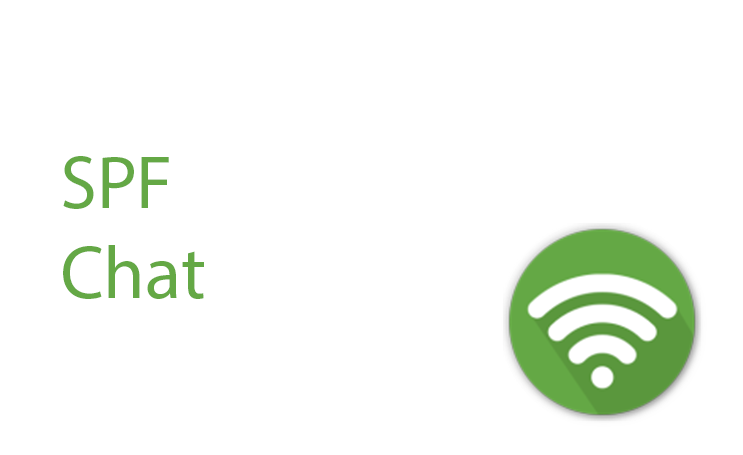
<style>
.page{position:relative;width:743px;height:455px;background:#ffffff}
.page>*{position:absolute;margin:0}
.t1{font:75px "MyriadPro-Regular";color:#64a845}
.t2{font:75px "MyriadPro-Regular";color:#0c7856}
</style>
<div class="page">
<p class="t1" style="left:63px;top:156px;width:141px;height:143px"><span class="t2"><br></span>SPF<br>Chat</p>
</div>
